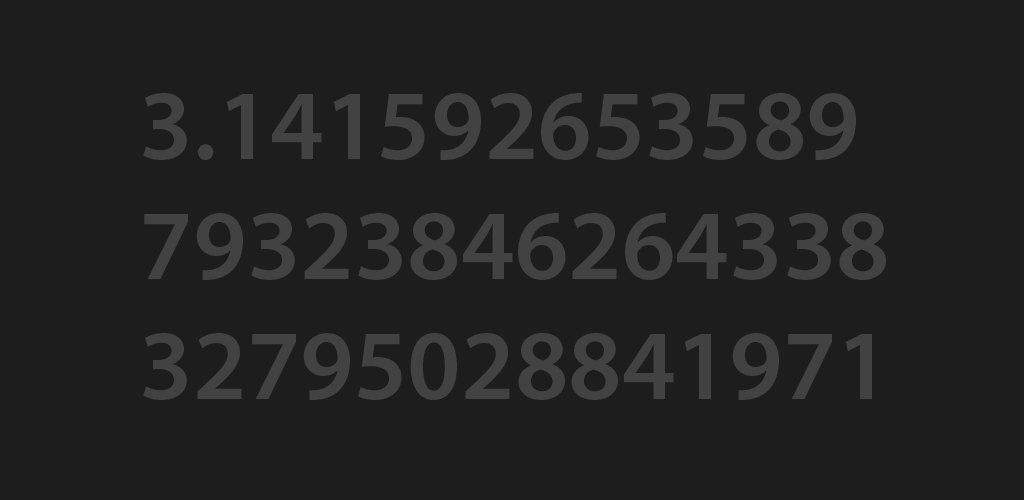
<style>
.page{position:relative;width:1024px;height:500px;background:#1e1d1d}
.page>*{position:absolute;margin:0}
.t1{font:100px "MyriadPro-Semibold";color:#424242}
</style>
<div class="page">
<p class="t1" style="left:143px;top:93px;width:743px;height:307px">3.141592653589<br>79323846264338<br>32795028841971</p>
</div>
